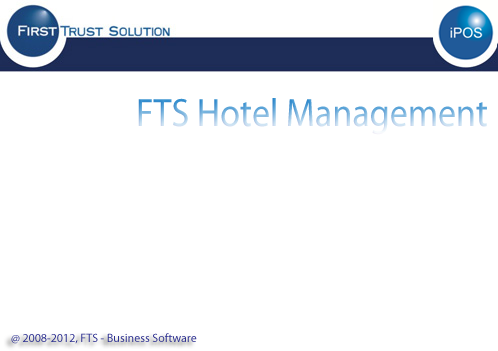
<style>
.page{position:relative;width:498px;height:351px;background:#ffffff}
.page>*{position:absolute;margin:0}
.t1{font:39.6px "MyriadPro-Regular";scale:0.91 1}
.t2{font:12px "MyriadPro-Regular";color:#2e3192}
</style>
<div class="page">
<p class="t1" style="left:138px;top:98px;width:349px;height:37px">FTS Hotel Management</p>
<p class="t2" style="left:11px;top:333px;width:186px;height:11px">@ 2008-2012, FTS - Business Software</p>
</div>
